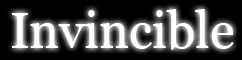
<style>
.page{position:relative;width:242px;height:60px;background:#000000}
.page>*{position:absolute;margin:0}
.t1{font:50.7px "Georgia";color:#ffffff}
</style>
<div class="page">
<p class="t1" style="left:12px;top:9px;width:222px;height:41px">Invincible</p>
</div>
